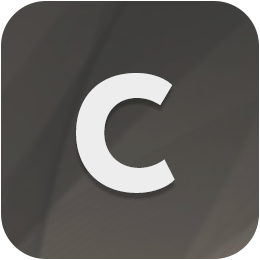
<style>
.page{position:relative;width:260px;height:260px}
.page>*{position:absolute;margin:0}
.t1{font:165.4px "Circe-ExtraBold";color:#ededed}
</style>
<div class="page">
<p class="t1" style="left:76px;top:73px;width:99px;height:120px">C</p>
</div>
